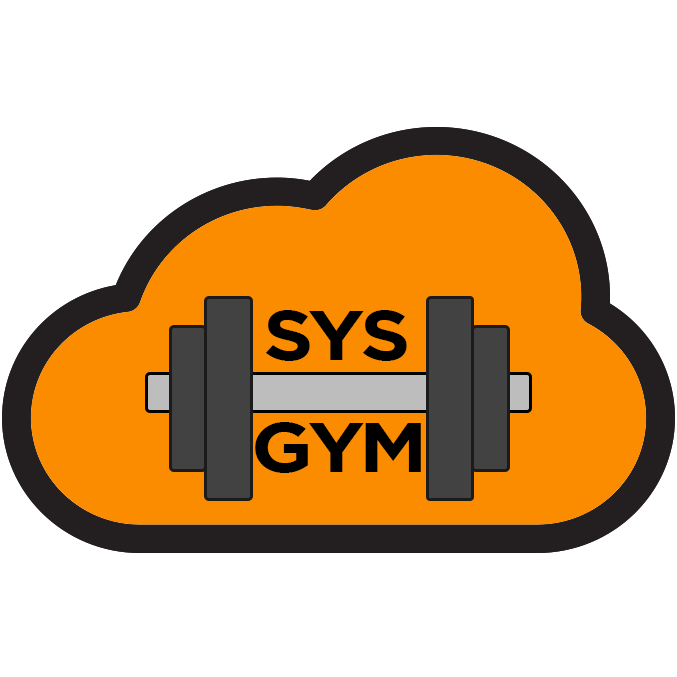
<style>
.page{position:relative;width:677px;height:677px;background:#ffffff}
.page>*{position:absolute;margin:0}
.t1{font:70px "Gotham-Bold";letter-spacing:-0.06em;color:#000000;scale:1.12 1}
</style>
<div class="page">
<p class="t1" style="left:265px;top:310px;width:142px;height:51px">SYS</p>
<p class="t1" style="left:255px;top:422px;width:166px;height:51px">GYM</p>
</div>
